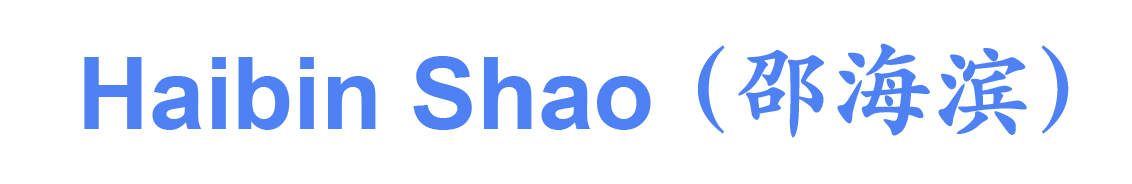
<style>
.page{position:relative;width:1132px;height:184px;background:#ffffff}
.page>*{position:absolute;margin:0}
.t1{font:100px "STKaitiTC-Black";color:#4e81f3}
.t2{font:100px "Arial-BoldMT";color:#4e81f3}
</style>
<div class="page">
<p class="t1" style="left:698px;top:43px;width:371px;height:95px">（邵海滨）</p>
<p class="t2" style="left:84px;top:56px;width:567px;height:74px">Haibin Shao</p>
</div>
